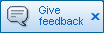
<style>
.page{position:relative;width:104px;height:33px}
.page>*{position:absolute;margin:0}
.t1{font:11px/11px "ArialMT";color:#0066cc}
.t2{font:13px "ArialMT";letter-spacing:0.13em;color:#0066cc;scale:1.4 1}
</style>
<div class="page">
<p class="t1" style="left:39px;top:6px;width:44px;height:19px">Give<br>feedback</p>
<p class="t2" style="left:90px;top:13px;width:10px;height:7px">x</p>
</div>
